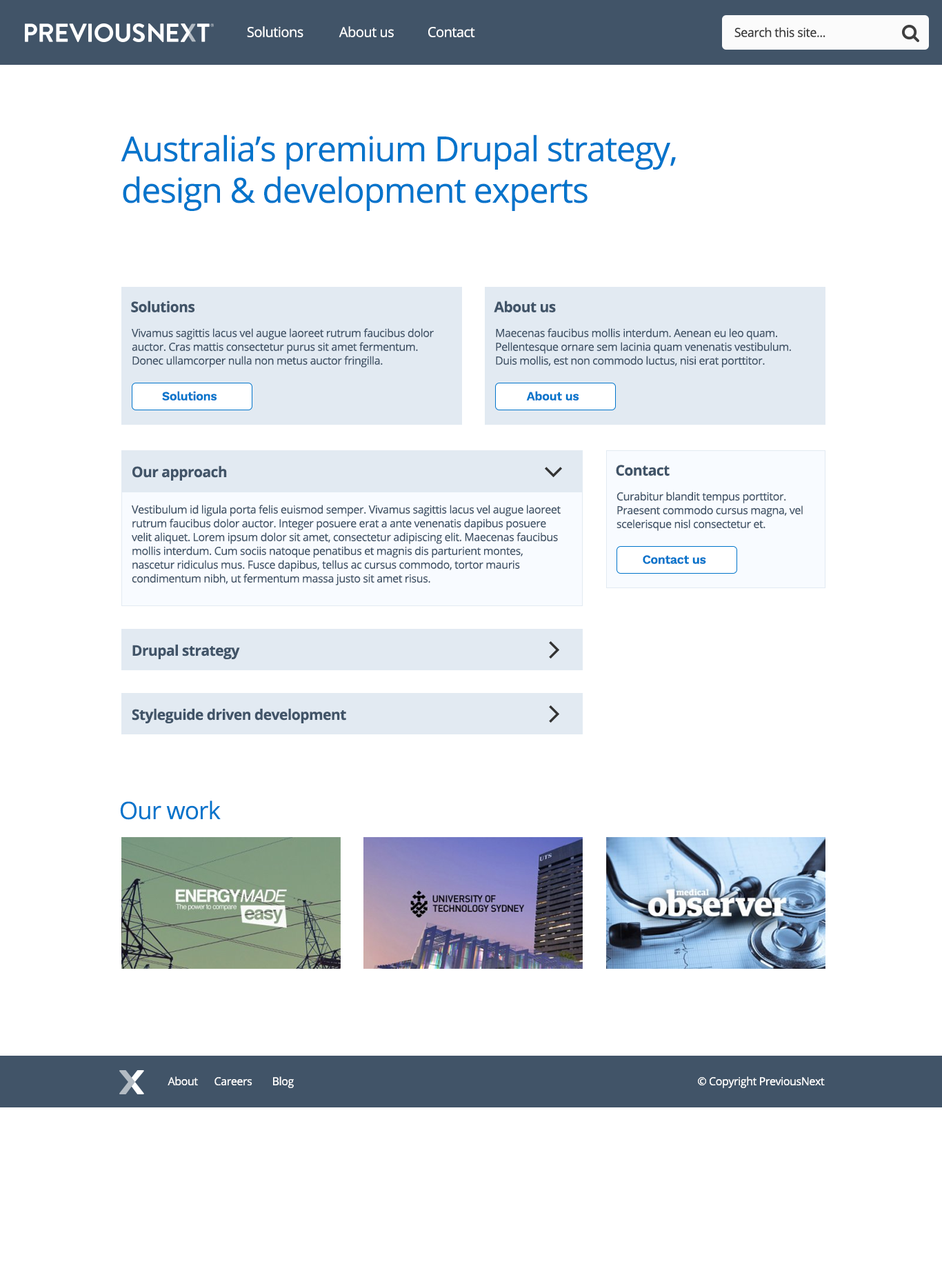
<style>
.page{position:relative;width:942px;height:1266px;background:#ffffff}
.page>*{position:absolute;margin:0}
.t1{font:13.8px "OpenSans";letter-spacing:-0.025em;color:#ffffff}
.t2{font:12.4px "OpenSans";letter-spacing:-0.025em;color:#343434}
.t3{font:34.5px/41.4px "OpenSans";letter-spacing:-0.025em;color:#0074cb}
.t4{font:14.5px "OpenSans-Bold";letter-spacing:-0.025em;color:#415468}
.t5{font:11px/13.8px "OpenSans";letter-spacing:-0.025em;color:#415468}
.t6{font:12.4px "WorkSans-SemiBold";letter-spacing:-0.025em;color:#0074cb}
.t7{font:24.1px "OpenSans";letter-spacing:-0.025em;color:#0074cb}
.t8{font:11px "OpenSans";letter-spacing:-0.025em;color:#ffffff}
</style>
<div class="page">
<p class="t1" style="left:247px;top:26px;width:56px;height:11px">Solutions</p>
<p class="t1" style="left:339px;top:26px;width:55px;height:11px">About us</p>
<p class="t1" style="left:428px;top:27px;width:47px;height:10px">Contact</p>
<p class="t2" style="left:734px;top:27px;width:91px;height:10px">Search this site...</p>
<p class="t3" style="left:121px;top:134px;width:555px;height:77px">Australia’s premium Drupal strategy, <br>design &amp; development experts</p>
<p class="t4" style="left:131px;top:301px;width:64px;height:11px">Solutions</p>
<p class="t4" style="left:494px;top:301px;width:62px;height:11px">About us</p>
<p class="t5" style="left:132px;top:328px;width:302px;height:40px">Vivamus sagittis lacus vel augue laoreet rutrum faucibus dolor auctor. Cras mattis consectetur purus sit amet fermentum. Donec ullamcorper nulla non metus auctor fringilla.</p>
<p class="t5" style="left:496px;top:328px;width:295px;height:40px">Maecenas faucibus mollis interdum. Aenean eu leo quam. Pellentesque ornare sem lacinia quam venenatis vestibulum. Duis mollis, est non commodo luctus, nisi erat porttitor.</p>
<p class="t6" style="left:162px;top:391px;width:55px;height:10px">Solutions</p>
<p class="t6" style="left:526px;top:391px;width:53px;height:10px">About us</p>
<p class="t4" style="left:132px;top:465px;width:95px;height:16px">Our approach</p>
<p class="t4" style="left:616px;top:465px;width:54px;height:11px">Contact</p>
<p class="t5" style="left:616px;top:492px;width:187px;height:39px">Curabitur blandit tempus porttitor. Praesent commodo cursus magna, vel scelerisque nisl consectetur et.</p>
<p class="t5" style="left:132px;top:505px;width:429px;height:80px">Vestibulum id ligula porta felis euismod semper. Vivamus sagittis lacus vel augue laoreet rutrum faucibus dolor auctor. Integer posuere erat a ante venenatis dapibus posuere velit aliquet. Lorem ipsum dolor sit amet, consectetur adipiscing elit. Maecenas faucibus mollis interdum. Cum sociis natoque penatibus et magnis dis parturient montes, nascetur ridiculus mus. Fusce dapibus, tellus ac cursus commodo, tortor mauris condimentum nibh, ut fermentum massa justo sit amet risus.</p>
<p class="t6" style="left:643px;top:555px;width:63px;height:9px">Contact us</p>
<p class="t4" style="left:132px;top:644px;width:108px;height:15px">Drupal strategy</p>
<p class="t4" style="left:132px;top:708px;width:214px;height:15px">Styleguide driven development</p>
<p class="t7" style="left:120px;top:801px;width:101px;height:19px">Our work</p>
<p class="t8" style="left:168px;top:1076px;width:30px;height:9px">About</p>
<p class="t8" style="left:214px;top:1077px;width:38px;height:8px">Careers</p>
<p class="t8" style="left:273px;top:1076px;width:21px;height:12px">Blog</p>
<p class="t8" style="left:698px;top:1076px;width:127px;height:12px">© Copyright PreviousNext</p>
</div>
